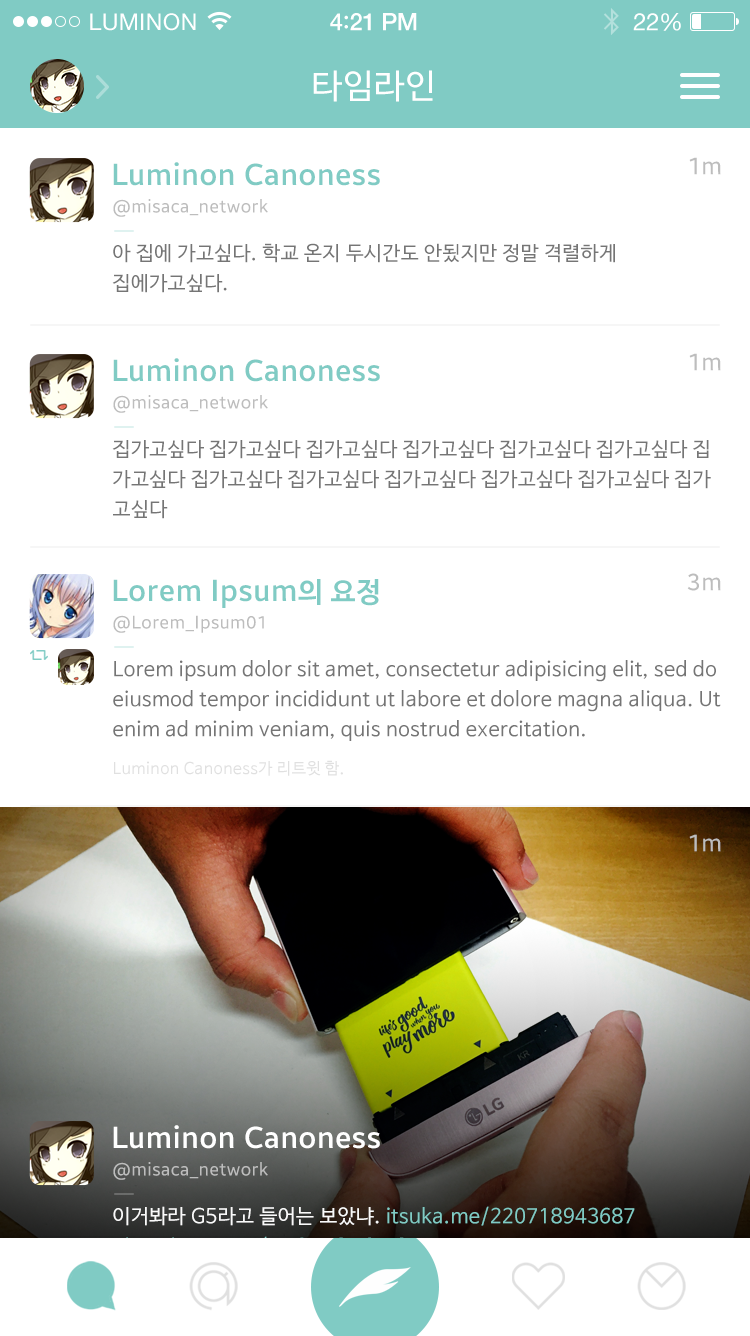
<style>
.page{position:relative;width:750px;height:1336px;background:#ffffff}
.page>*{position:absolute;margin:0}
.t1{font:34px "NanumBarunGothic";letter-spacing:0.025em;color:#ffffff}
.t2{font:24px "BreezeSans";letter-spacing:0.025em;color:#bdbdbd}
.t3{font:30px "BreezeSans-Medium";letter-spacing:0.025em;color:#80cbc4}
.t4{font:18px "BreezeSans";letter-spacing:0.025em;color:#bdbdbd}
.t5{font:20px/30px "NanumBarunGothic";letter-spacing:0.025em;color:#757575}
.t6{font:28px "NanumBarunGothicBold";letter-spacing:0.025em;color:#80cbc4}
.t7{font:16px "NanumBarunGothic";letter-spacing:0.025em;color:#e0e0e0}
.t8{font:30px "BreezeSans-Medium";letter-spacing:0.025em;color:#ffffff}
.t9{font:20px/30px "NanumBarunGothic";letter-spacing:0.025em;color:#80cbc4}
.t10{font:20px/30px "NanumBarunGothic";letter-spacing:0.025em;color:#fafafa}
</style>
<div class="page">
<p class="t1" style="left:313px;top:70px;width:120px;height:32px">타임라인</p>
<p class="t2" style="left:689px;top:157px;width:32px;height:18px">1m</p>
<p class="t3" style="left:113px;top:162px;width:267px;height:24px">Luminon Canoness</p>
<p class="t4" style="left:113px;top:199px;width:155px;height:18px">@misaca_network</p>
<p class="t5" style="left:112px;top:243px;width:503px;height:50px">아 집에 가고싶다. 학교 온지 두시간도 안됬지만 정말 격렬하게<br>집에가고싶다.</p>
<p class="t2" style="left:689px;top:353px;width:32px;height:18px">1m</p>
<p class="t3" style="left:113px;top:358px;width:267px;height:24px">Luminon Canoness</p>
<p class="t4" style="left:113px;top:395px;width:155px;height:18px">@misaca_network</p>
<p class="t5" style="left:112px;top:440px;width:599px;height:79px">집가고싶다 집가고싶다 집가고싶다 집가고싶다 집가고싶다 집가고싶다 집<br>가고싶다 집가고싶다 집가고싶다 집가고싶다 집가고싶다 집가고싶다 집가<br>고싶다</p>
<p class="t3" style="left:113px;top:579px;width:266px;height:29px">Lorem Ipsum<span class="t6">의 요정</span></p>
<p class="t2" style="left:687px;top:573px;width:34px;height:18px">3m</p>
<p class="t4" style="left:113px;top:615px;width:151px;height:18px">@Lorem_Ipsum01</p>
<p class="t5" style="left:113px;top:660px;width:608px;height:81px">Lorem ipsum dolor sit amet, consectetur adipisicing elit, sed do <br>eiusmod tempor incididunt ut labore et dolore magna aliqua. Ut<br>enim ad minim veniam, quis nostrud exercitation.</p>
<p class="t7" style="left:114px;top:760px;width:229px;height:16px">Luminon Canoness가 리트윗 함.</p>
<p class="t2" style="left:689px;top:834px;width:32px;height:18px">1m</p>
<p class="t8" style="left:113px;top:1125px;width:267px;height:24px">Luminon Canoness</p>
<p class="t4" style="left:113px;top:1162px;width:155px;height:18px">@misaca_network</p>
<p class="t9" style="left:113px;top:1206px;width:522px;height:52px"><span class="t10">이거봐라 G5라고 들어는 보았냐. </span>itsuka.me/220718943687<br>pic.twitter.com/CD2S1GN6IAG1S1LTA</p>
</div>
